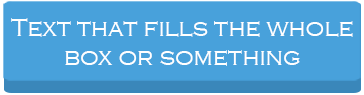
<style>
.page{position:relative;width:364px;height:95px;background:#48a1db}
.page>*{position:absolute;margin:0}
.t1{font:25px "CopperplateGothic-Light";color:#ffffff}
</style>
<div class="page">
<p class="t1" style="left:11px;top:18px;width:342px;height:19px">Text that fills the whole</p>
<p class="t1" style="left:65px;top:50px;width:235px;height:16px">box or something</p>
</div>
